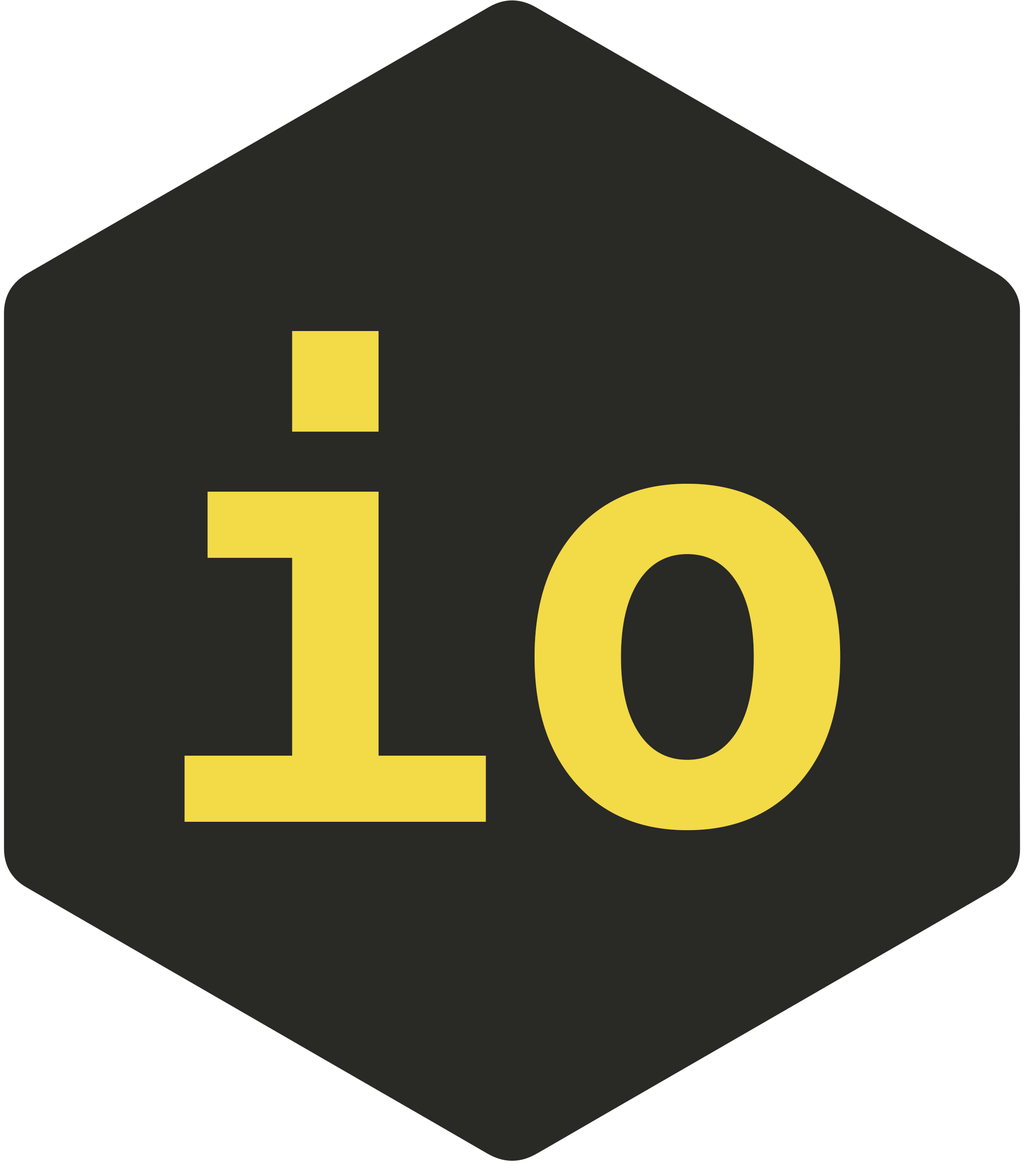
<style>
.page{position:relative;width:1024px;height:1164px;background:#292926}
.page>*{position:absolute;margin:0}
.t1{font:603.6px "DejaVuSansMonoPowerline-Bold";color:#f3da47}
</style>
<div class="page">
<p class="t1" style="left:184px;top:331px;width:657px;height:499px">io</p>
</div>
